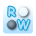
<style>
.page{position:relative;width:36px;height:36px;background:#ffffff}
.page>*{position:absolute;margin:0}
.t1{font:12px "ComicSansMS";color:#aedeff;font-weight:bold}
</style>
<div class="page">
<p class="t1" style="left:8px;top:6px;width:8px;height:11px">R</p>
<p class="t1" style="left:17px;top:19px;width:13px;height:11px">W</p>
</div>
